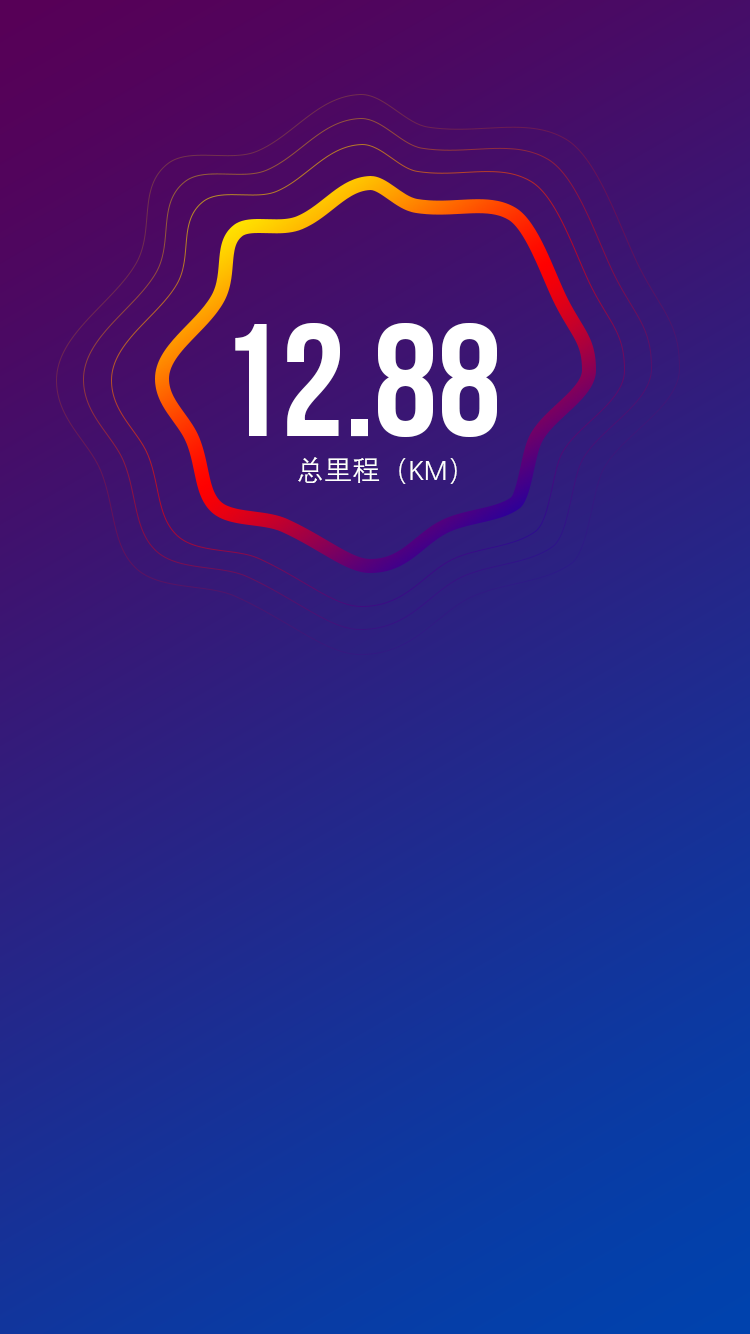
<style>
.page{position:relative;width:750px;height:1334px}
.page>*{position:absolute;margin:0}
.t1{font:160px "BebasNeue";color:#ffffff}
.t2{font:28px "DengXian";color:#ffffff}
</style>
<div class="page">
<p class="t1" style="left:235px;top:323px;width:262px;height:114px">12.88</p>
<p class="t2" style="left:298px;top:457px;width:159px;height:27px">总里程（KM）</p>
</div>
